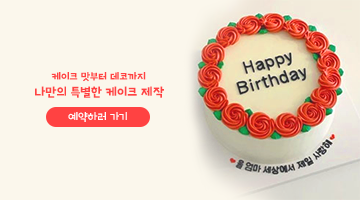
<style>
.page{position:relative;width:360px;height:200px;background:#fbf7ec}
.page>*{position:absolute;margin:0}
.t1{font:10px "BRB";color:#ff4242;text-transform:uppercase}
.t2{font:12px "BRB";color:#ff4242;text-transform:uppercase}
.t3{font:11px "BRR";color:#ffffff;text-transform:uppercase}
</style>
<div class="page">
<p class="t1" style="left:51px;top:72px;width:95px;height:10px">케이크 맛부터 데코까지</p>
<p class="t2" style="left:35px;top:86px;width:129px;height:12px">나만의 특별한 케이크 제작</p>
<p class="t3" style="left:68px;top:112px;width:59px;height:10px">예약하러 가기</p>
</div>
